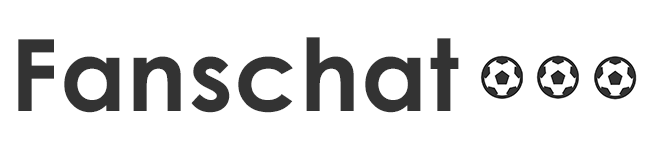
<style>
.page{position:relative;width:655px;height:150px;background:#ffffff}
.page>*{position:absolute;margin:0}
.t1{font:100px "CenturyGothic-Bold";letter-spacing:0.015em;color:#333333}
</style>
<div class="page">
<p class="t1" style="left:18px;top:37px;width:441px;height:76px">Fanschat</p>
</div>
